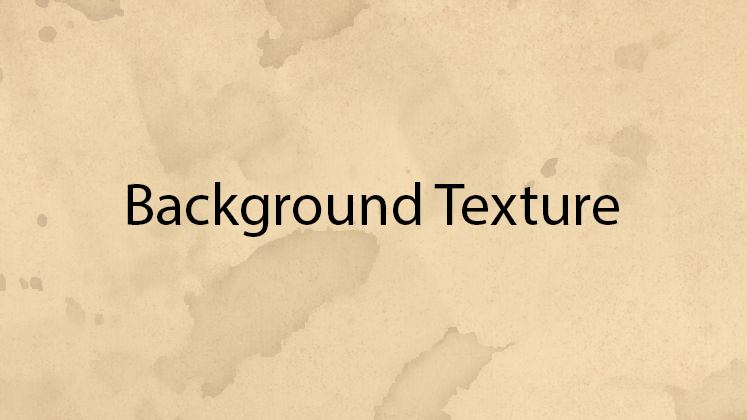
<style>
.page{position:relative;width:747px;height:420px}
.page>*{position:absolute;margin:0}
.t1{font:60px "MyriadPro-Regular";color:#000000}
</style>
<div class="page">
<p class="t1" style="left:127px;top:182px;width:492px;height:55px">Background Texture</p>
</div>
